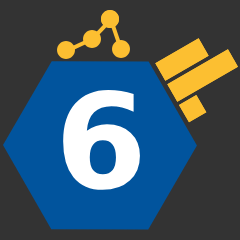
<style>
.page{position:relative;width:240px;height:240px;background:#333333}
.page>*{position:absolute;margin:0}
.t1{font:132.4px "Verdana-Bold";color:#ffffff}
</style>
<div class="page">
<p class="t1" style="left:63px;top:90px;width:77px;height:100px">6</p>
</div>
